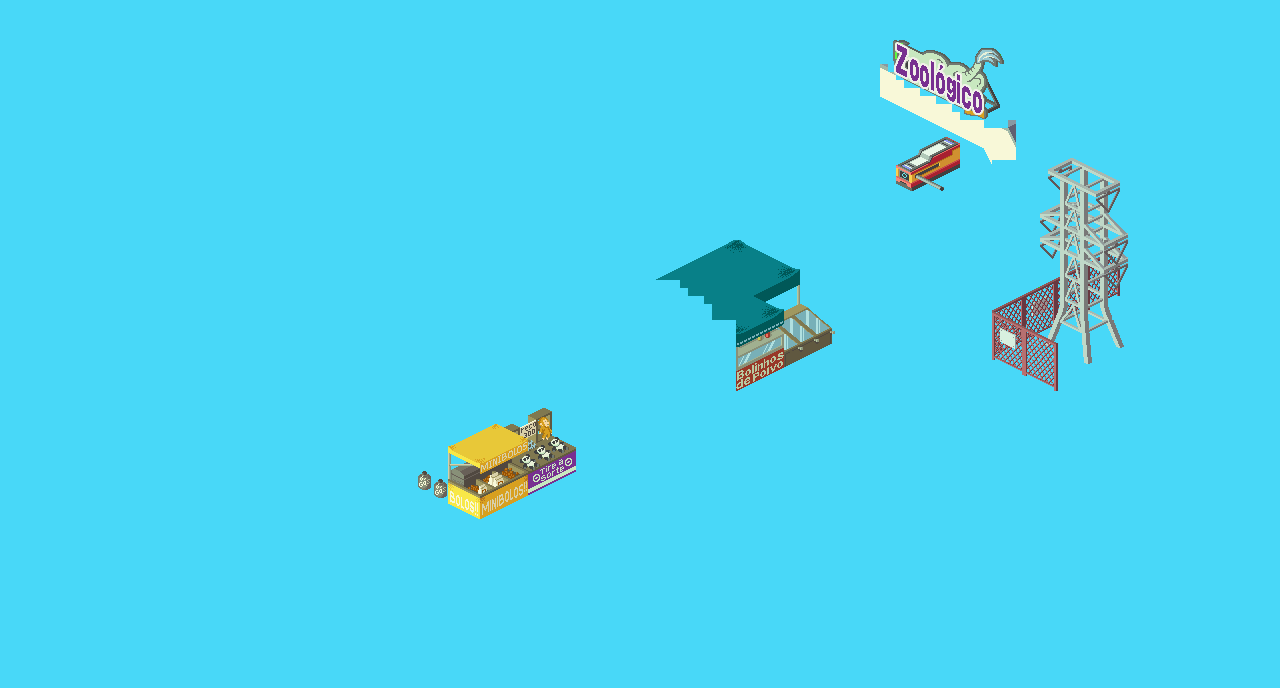
<style>
.page{position:relative;width:1280px;height:688px;background:#48d8f8}
.page>*{position:absolute;margin:0}
.t1{font:40px "Arial-Black";color:#783090;scale:0.45 1}
.t2{font:30.8px "Arial-Black";color:#783090;scale:0.59 1}
.t3{font:11.3px "Arial-BoldMT";letter-spacing:0.08em;color:#b8c8a0;scale:1.23 1}
.t4{font:11.3px "Arial-BoldMT";letter-spacing:0.02em;color:#b8c8a0}
.t5{font:11.3px "Arial-BoldMT";letter-spacing:-0.06em;color:#b8c8a0;scale:1.28 1}
.t6{font:11.3px "Arial-BoldMT";letter-spacing:-0.08em;color:#b8c8a0;scale:1.28 1}
.t7{font:11.3px "Arial-BoldMT";letter-spacing:-0.08em;color:#b8c8a0;scale:1.13 1}
.t8{font:11.3px "Arial-BoldMT";letter-spacing:-0.04em;color:#b8c8a0;scale:1.13 1}
.t9{font:11.3px "Arial-BoldMT";letter-spacing:0.08em;color:#b8c8a0}
.t10{font:11.6px "Arial-BoldMT";color:#b8c8a0;scale:1.25 1}
.t11{font:12.7px "Arial-BoldMT";letter-spacing:0.08em;color:#b8c8a0;scale:1.09 1}
.t12{font:10.3px "Arial-BoldMT";letter-spacing:-0.06em;color:#b8c8a0;scale:1.36 1}
.t13{font:8.8px "Arial-BoldMT";letter-spacing:0.08em;color:#b8c8a0;scale:1.57 1}
.t14{font:8.6px "Verdana";letter-spacing:-0.02em;color:#d8d0a8;scale:1.38 1}
.t15{font:8.6px "Verdana";letter-spacing:-0.1em;color:#d8d0a8;scale:1.89 1}
.t16{font:8.6px "Verdana";letter-spacing:-0.12em;color:#d8d0a8;scale:1.11 1}
.t17{font:8.6px "Verdana";letter-spacing:-0.12em;color:#d8d0a8;scale:1.38 1}
.t18{font:8.6px "Verdana";color:#d8d0a8;scale:0.83 1}
.t19{font:8.6px "Verdana";color:#d8d0a8;scale:1.08 1}
.t20{font:8.6px "Verdana";color:#d8d0a8;scale:1.09 1}
.t21{font:10px "Bahnschrift";color:#c8e8c0;scale:1.12 1}
.t22{font:6.6px "Bahnschrift";letter-spacing:0.02em;color:#c8e8c0;scale:1.69 1}
.t23{font:9px "Bahnschrift";letter-spacing:-0.06em;color:#c8e8c0;scale:1.12 1}
.t24{font:10px "Bahnschrift";letter-spacing:0.02em;color:#c8e8c0;scale:1.12 1}
.t25{font:6.6px "Bahnschrift";color:#c8e8c0;scale:1.69 1}
.t26{font:9.8px "Bahnschrift";letter-spacing:-0.04em;color:#c8e8c0;scale:1.14 1}
.t27{font:10px "Bahnschrift";letter-spacing:0.12em;color:#c8e8c0;scale:1.12 1}
.t28{font:14.3px "Verdana";color:#f8f8d8;scale:0.81 1}
.t29{font:14.3px "Verdana";letter-spacing:-0.02em;color:#f8f8d8;scale:0.42 1}
.t30{font:14.3px "Verdana";letter-spacing:0.02em;color:#f8f8d8;scale:0.65 1}
.t31{font:14.3px "Verdana";letter-spacing:-0.06em;color:#f8f8d8;scale:0.42 1}
.t32{font:14.3px "Verdana";color:#f8f8d8;scale:0.64 1}
.t33{font:17.6px "Verdana";letter-spacing:-0.08em;color:#f8f8d8;scale:0.52 1}
.t34{font:17.6px "Verdana";color:#f8f8d8;scale:0.52 1}
</style>
<div class="page">
<p class="t1" style="left:896px;top:44px;width:86px;height:69px;rotate:26deg">Zooló<span class="t2">g</span>ico</p>
<p class="t3" style="left:737px;top:352px;width:47px;height:29px;rotate:-26deg">B<span class="t4">o</span><span class="t5">l</span><span class="t6">i</span><span class="t7">n</span><span class="t8">h</span><span class="t9">o</span><span class="t10">s</span></p>
<p class="t3" style="left:736px;top:361px;width:47px;height:28px;rotate:-26deg">d<span class="t11">e </span><span class="t12">P</span><span class="t4">o</span><span class="t13">l</span>v<span class="t4">o</span></p>
<p class="t14" style="left:481px;top:442px;width:46px;height:30px;rotate:-28deg">M<span class="t15">I</span><span class="t16">N</span><span class="t17">I</span>B<span class="t18">O</span><span class="t19">L</span><span class="t18">O</span><span class="t20">S</span></p>
<p class="t21" style="left:540px;top:459px;width:24px;height:22px;text-align:center;rotate:-26deg"><span class="t22">T</span><span class="t23">i</span><span class="t24">r</span>e a<br><span class="t25">S</span><span class="t26">o</span><span class="t27">r</span>te</p>
<p class="t28" style="left:450px;top:491px;width:28px;height:25px;rotate:26deg">B<span class="t29">O</span><span class="t30">L</span><span class="t31">O</span><span class="t32">S</span><span class="t33">!</span><span class="t34">!</span></p>
<p class="t28" style="left:450px;top:492px;width:24px;height:21px;rotate:26deg">B<span class="t29">O</span><span class="t30">L</span><span class="t31">O</span><span class="t32">S</span></p>
</div>
